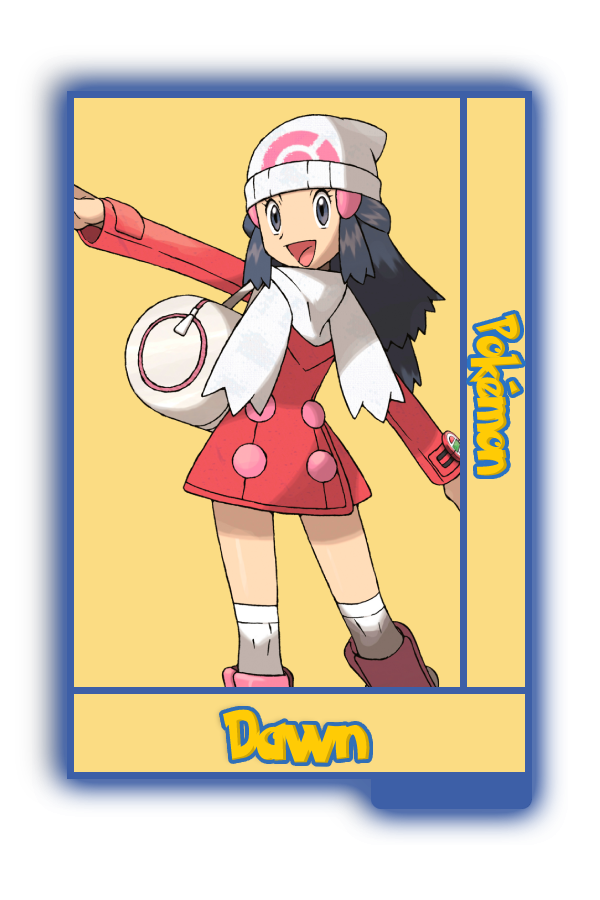
<style>
.page{position:relative;width:600px;height:900px;background:#fbdc83}
.page>*{position:absolute;margin:0}
.t1{font:48.8px "PokemonSolidNormal";color:#ffcb05;scale:0.8 1}
.t2{font:56.6px "PokemonSolidNormal";color:#ffcb05;scale:0.92 1}
</style>
<div class="page">
<p class="t1" style="left:469px;top:313px;width:54px;height:163px;rotate:90deg">Pokémon</p>
<p class="t2" style="left:222px;top:709px;width:148px;height:54px">Dawn</p>
</div>
